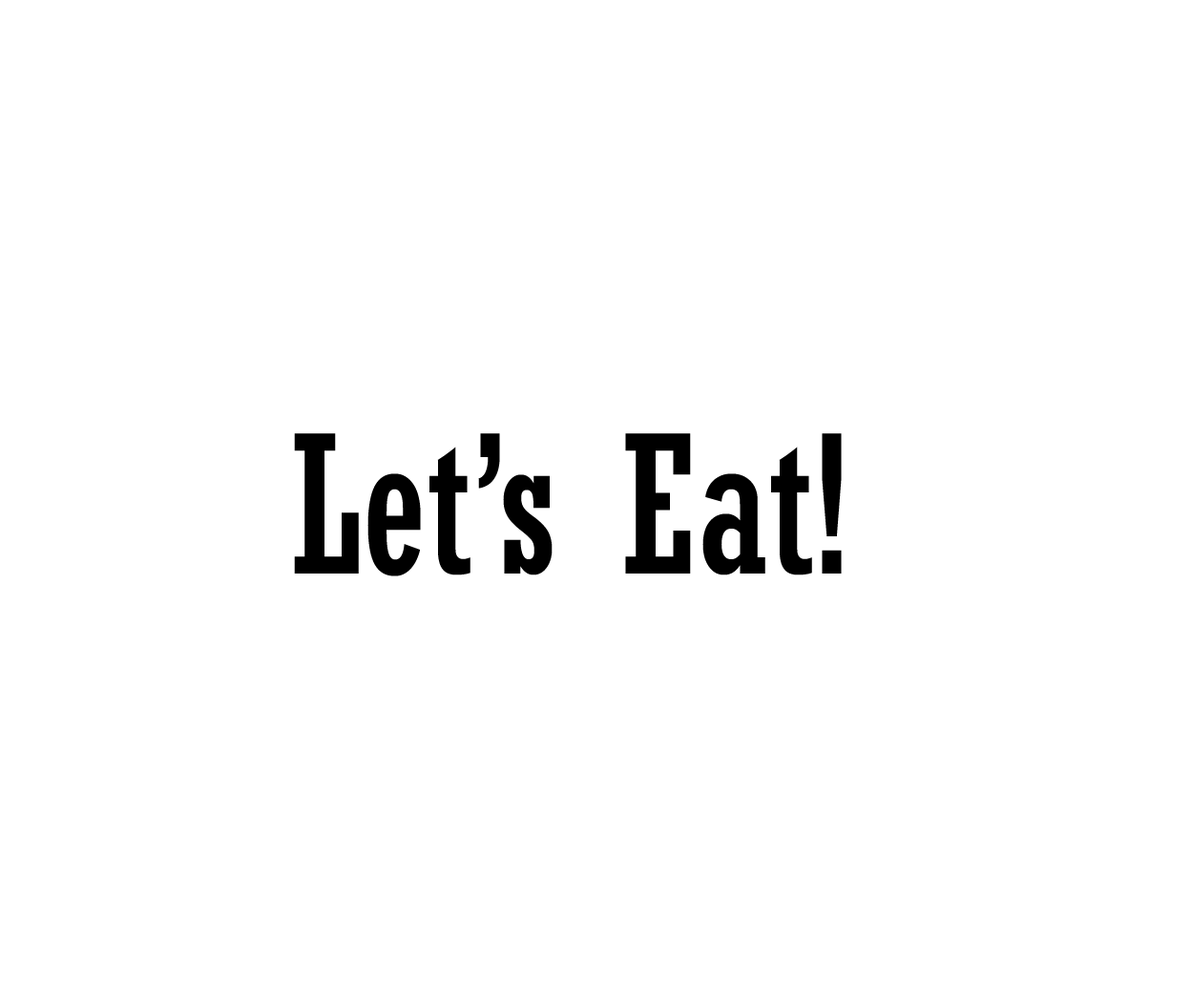
<style>
.page{position:relative;width:1191px;height:1002px;background:#ffffff}
.page>*{position:absolute;margin:0}
.t1{font:190.1px "Rockwell-Condensed";color:#000000}
</style>
<div class="page">
<p class="t1" style="left:294px;top:433px;width:547px;height:143px">Let’s Eat!</p>
</div>
